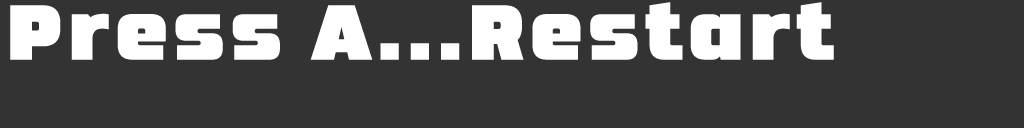
<style>
.page{position:relative;width:1024px;height:128px;background:#333333}
.page>*{position:absolute;margin:0}
.t1{font:77.4px "NEOMETRA";letter-spacing:0.07em;color:#ffffff;scale:0.95 1}
</style>
<div class="page">
<p class="t1" style="left:10px;top:2px;width:824px;height:58px">Press A...Restart</p>
</div>
